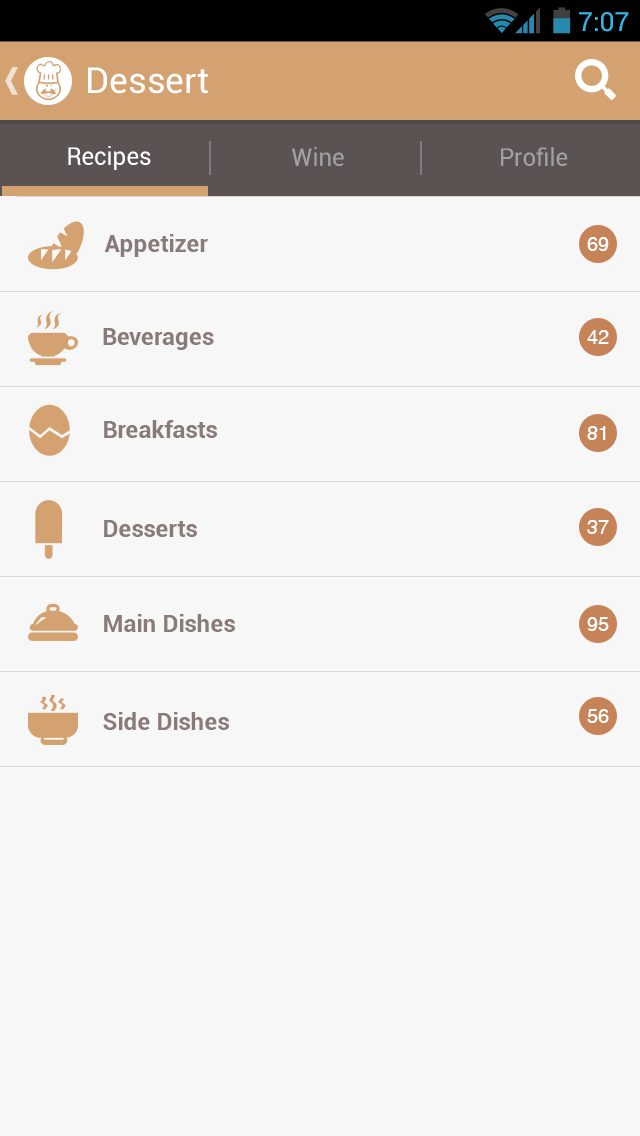
<style>
.page{position:relative;width:640px;height:1136px;background:#f7f7f7}
.page>*{position:absolute;margin:0}
.t1{font:26.6px "Roboto-Regular";color:#33b5e5}
.t2{font:35.8px "Roboto-Regular";color:#ffffff}
.t3{font:25px "Roboto-Regular";color:#fefefe;scale:0.96 1}
.t4{font:25px "Roboto-Regular";color:#a1a1a1;scale:0.96 1}
.t5{font:24px "Roboto-Bold";color:#8a7b7b}
.t6{font:20px "Helvetica";color:#ffffff}
</style>
<div class="page">
<p class="t1" style="left:579px;top:12px;width:50px;height:20px">7:07</p>
<p class="t2" style="left:88px;top:67px;width:120px;height:27px">Dessert</p>
<p class="t3" style="left:68px;top:146px;width:83px;height:24px">Recipes</p>
<p class="t4" style="left:292px;top:147px;width:52px;height:19px">Wine</p>
<p class="t4" style="left:501px;top:147px;width:67px;height:19px">Profile</p>
<p class="t5" style="left:104px;top:234px;width:104px;height:23px">Appetizer</p>
<p class="t6" style="left:587px;top:237px;width:22px;height:14px">69</p>
<p class="t5" style="left:103px;top:328px;width:111px;height:22px">Beverages</p>
<p class="t6" style="left:587px;top:330px;width:22px;height:14px">42</p>
<p class="t5" style="left:104px;top:420px;width:113px;height:18px">Breakfasts</p>
<p class="t6" style="left:587px;top:426px;width:19px;height:14px">81</p>
<p class="t5" style="left:104px;top:520px;width:93px;height:17px">Desserts</p>
<p class="t6" style="left:587px;top:520px;width:22px;height:14px">37</p>
<p class="t5" style="left:104px;top:614px;width:131px;height:18px">Main Dishes</p>
<p class="t6" style="left:587px;top:617px;width:22px;height:14px">95</p>
<p class="t5" style="left:103px;top:712px;width:126px;height:18px">Side Dishes</p>
<p class="t6" style="left:587px;top:709px;width:22px;height:14px">56</p>
</div>
